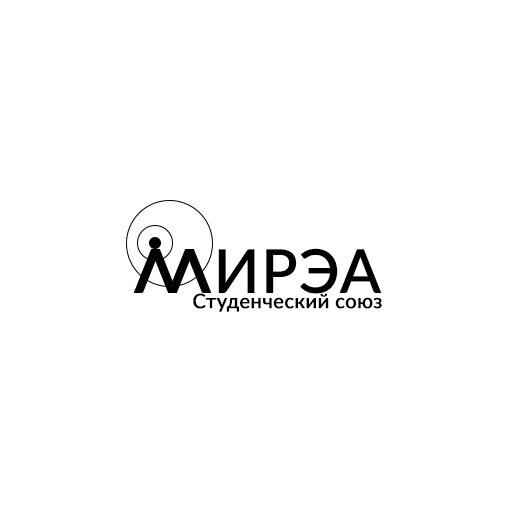
<style>
.page{position:relative;width:512px;height:512px;background:#ffffff}
.page>*{position:absolute;margin:0}
.t1{font:60px "Lato-Medium";color:#000000;font-weight:bold}
.t2{font:20px "Lato-Medium";color:#000000;font-weight:bold}
</style>
<div class="page">
<p class="t1" style="left:218px;top:248px;width:164px;height:46px">ИРЭА</p>
<p class="t2" style="left:193px;top:293px;width:189px;height:19px">Студенческий союз</p>
</div>
